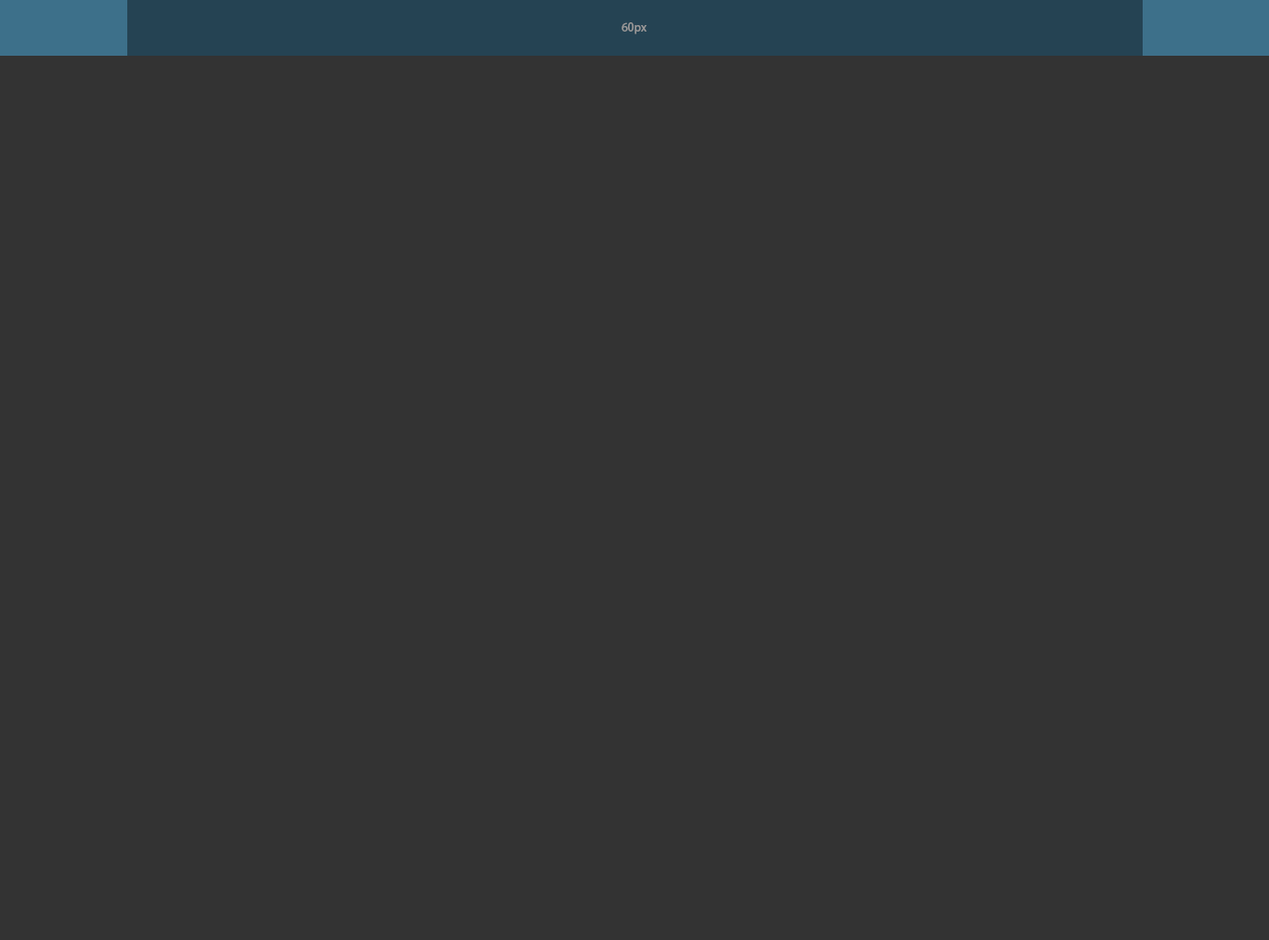
<style>
.page{position:relative;width:1269px;height:940px;background:#333333}
.page>*{position:absolute;margin:0}
.t1{font:11.1px "AdobeHeitiStd-Regular";color:#999898}
</style>
<div class="page">
<p class="t1" style="left:621px;top:22px;width:25px;height:12px">60px</p>
</div>
